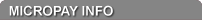
<style>
.page{position:relative;width:202px;height:20px;background:#858585}
.page>*{position:absolute;margin:0}
.t1{font:13.3px "Arial-BoldMT";color:#ffffff}
</style>
<div class="page">
<p class="t1" style="left:9px;top:5px;width:104px;height:11px">MICROPAY INFO</p>
</div>
